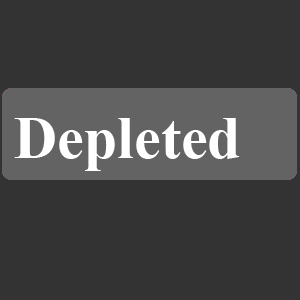
<style>
.page{position:relative;width:300px;height:300px;background:#333333}
.page>*{position:absolute;margin:0}
.t1{font:60px "TimesNewRomanPS-BoldMT";color:#ffffff}
</style>
<div class="page">
<p class="t1" style="left:14px;top:118px;width:226px;height:53px">Depleted</p>
</div>
